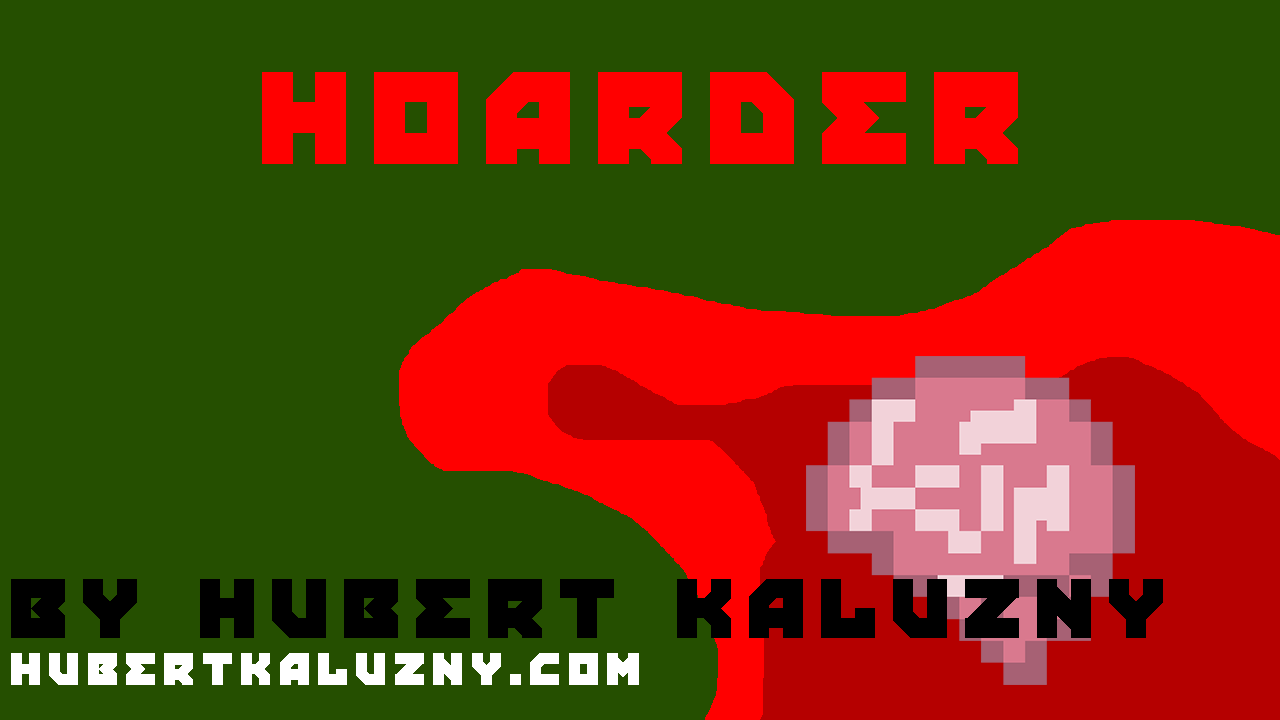
<style>
.page{position:relative;width:1280px;height:720px;background:#254f00}
.page>*{position:absolute;margin:0}
.t1{font:90px "PropagandaRegular";letter-spacing:0.1em;color:#000000}
.t2{font:48px "PropagandaRegular";letter-spacing:0.1em;color:#ffffff}
</style>
<div class="page">
<p class="t1" style="left:11px;top:579px;width:1152px;height:59px">by Hubert Kaluzny</p>
<p class="t2" style="left:11px;top:653px;width:628px;height:32px">hubertkaluzny.com</p>
</div>
